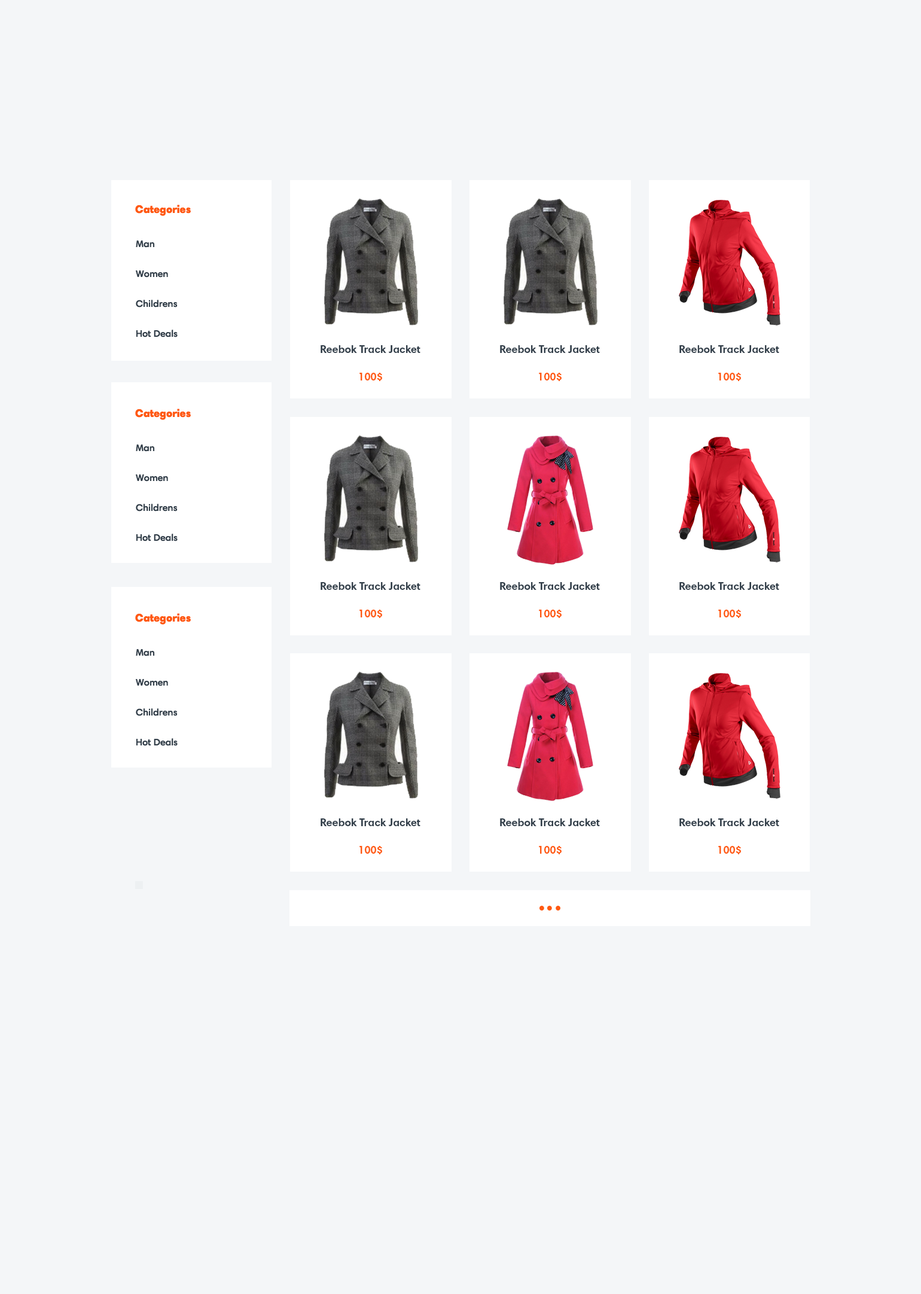
<style>
.page{position:relative;width:921px;height:1294px;background:#f4f6f8}
.page>*{position:absolute;margin:0}
.t1{font:10.8px "HarmoniaSansProCyr-Black";color:#ff5912}
.t2{font:9.6px/29.9px "HarmoniaSansProCyr-SemiBd";color:#34404b}
.t3{font:10.8px "HarmoniaSansProCyr-Bold";color:#34404b}
.t4{font:10.8px "HarmoniaSansProCyr-Bold";color:#ff5912}
</style>
<div class="page">
<p class="t1" style="left:135px;top:205px;width:56px;height:11px">Categories</p>
<p class="t2" style="left:136px;top:241px;width:42px;height:96px;text-align:right">Man<br>Women<br>Childrens<br>Hot Deals</p>
<p class="t3" style="left:321px;top:345px;width:100px;height:8px">Reebok Track Jacket</p>
<p class="t3" style="left:500px;top:345px;width:100px;height:8px">Reebok Track Jacket</p>
<p class="t3" style="left:680px;top:345px;width:100px;height:8px">Reebok Track Jacket</p>
<p class="t4" style="left:360px;top:373px;width:22px;height:8px">$100</p>
<p class="t4" style="left:539px;top:373px;width:23px;height:8px">$100</p>
<p class="t4" style="left:719px;top:373px;width:22px;height:8px">$100</p>
<p class="t1" style="left:135px;top:409px;width:56px;height:11px">Categories</p>
<p class="t2" style="left:136px;top:445px;width:42px;height:96px;text-align:right">Man<br>Women<br>Childrens<br>Hot Deals</p>
<p class="t3" style="left:321px;top:582px;width:100px;height:8px">Reebok Track Jacket</p>
<p class="t3" style="left:500px;top:582px;width:100px;height:8px">Reebok Track Jacket</p>
<p class="t3" style="left:680px;top:582px;width:100px;height:8px">Reebok Track Jacket</p>
<p class="t1" style="left:135px;top:613px;width:56px;height:12px">Categories</p>
<p class="t4" style="left:360px;top:610px;width:22px;height:8px">$100</p>
<p class="t4" style="left:539px;top:610px;width:23px;height:8px">$100</p>
<p class="t4" style="left:719px;top:610px;width:22px;height:8px">$100</p>
<p class="t2" style="left:136px;top:649px;width:42px;height:97px;text-align:right">Man<br>Women<br>Childrens<br>Hot Deals</p>
<p class="t3" style="left:321px;top:818px;width:100px;height:8px">Reebok Track Jacket</p>
<p class="t3" style="left:500px;top:818px;width:100px;height:8px">Reebok Track Jacket</p>
<p class="t3" style="left:680px;top:818px;width:100px;height:8px">Reebok Track Jacket</p>
<p class="t4" style="left:360px;top:846px;width:22px;height:8px">$100</p>
<p class="t4" style="left:539px;top:846px;width:23px;height:8px">$100</p>
<p class="t4" style="left:719px;top:846px;width:22px;height:8px">$100</p>
</div>
